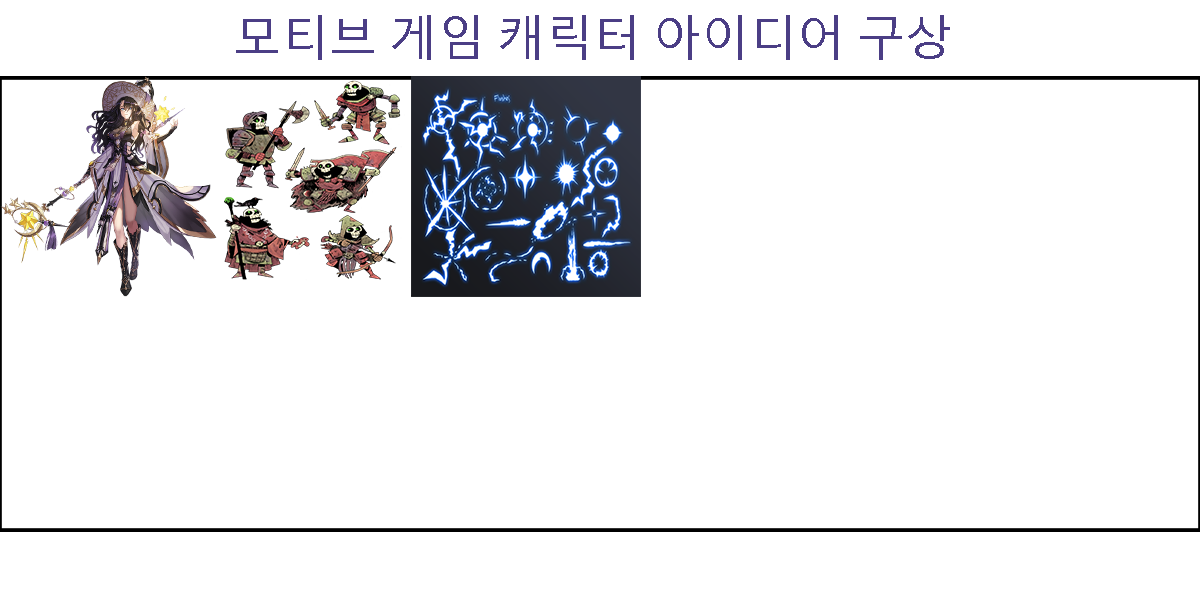
<style>
.page{position:relative;width:1200px;height:600px;background:#ffffff}
.page>*{position:absolute;margin:0}
.t1{font:48px "MalgunGothic";color:#4b3e85}
</style>
<div class="page">
<p class="t1" style="left:236px;top:15px;width:714px;height:45px">모티브 게임 캐릭터 아이디어 구상</p>
</div>
